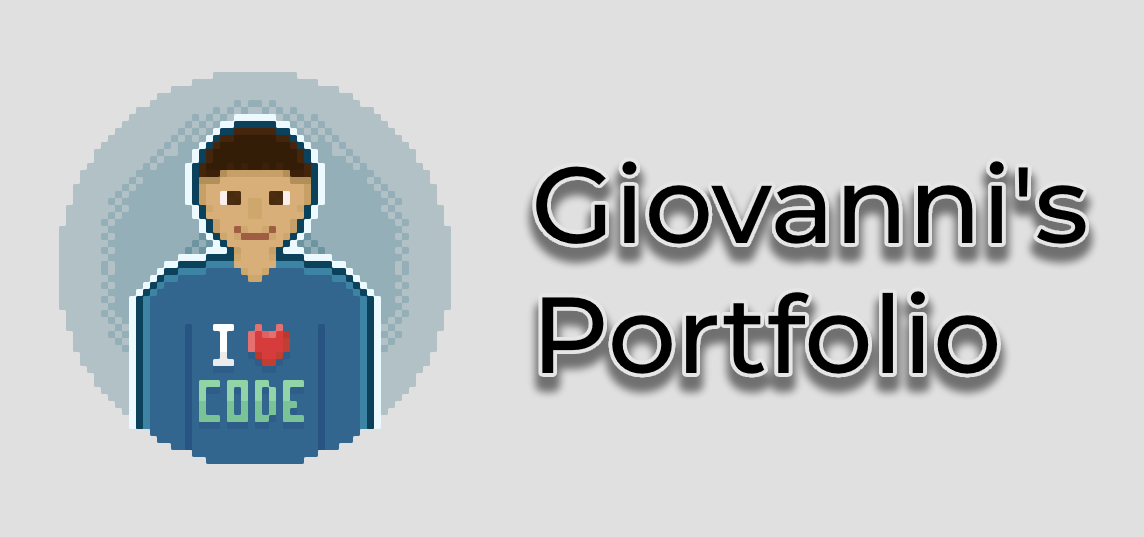
<style>
.page{position:relative;width:1144px;height:537px;background:#e0e0e0}
.page>*{position:absolute;margin:0}
.t1{font:108px "Montserrat-Medium";color:#000000}
</style>
<div class="page">
<p class="t1" style="left:536px;top:161px;width:550px;height:213px">Giovanni's<br>Portfolio</p>
</div>
